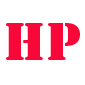
<style>
.page{position:relative;width:85px;height:85px;background:#ffffff}
.page>*{position:absolute;margin:0}
.t1{font:50px "StencilStd";color:#f80838}
</style>
<div class="page">
<p class="t1" style="left:6px;top:23px;width:74px;height:37px">HP</p>
</div>
